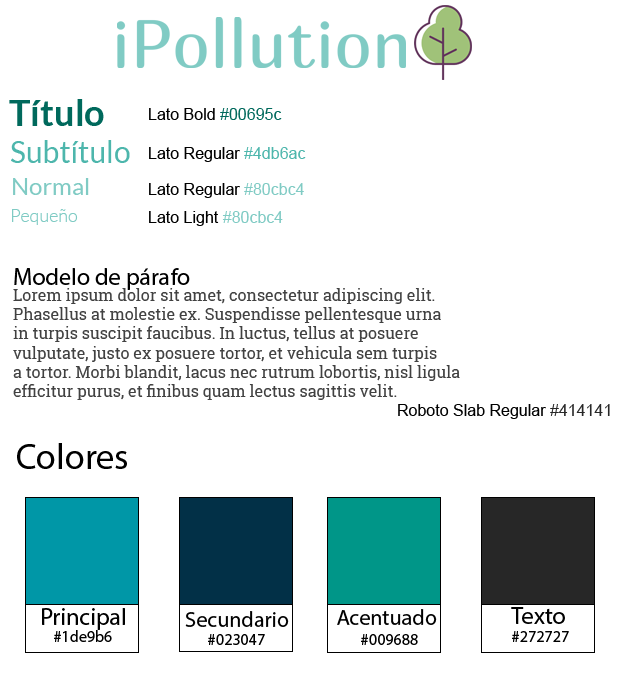
<style>
.page{position:relative;width:626px;height:674px;background:#ffffff}
.page>*{position:absolute;margin:0}
.t1{font:36px "Lato-Bold";color:#00695c}
.t2{font:16px "ArialMT";color:#010101}
.t3{font:16px "ArialMT";color:#00695c}
.t4{font:30px "Lato-Regular";color:#4db6ac}
.t5{font:16px "ArialMT";color:#000000}
.t6{font:16px "ArialMT";color:#4db6ac}
.t7{font:24px "Lato-Regular";color:#80cbc4}
.t8{font:16px "ArialMT";color:#80cbc4}
.t9{font:18px "Lato-Light";color:#80cbc4}
.t10{font:24px "MyriadPro-Regular";color:#000000}
.t11{font:16px "RobotoSlab-Regular";color:#414141}
.t12{font:16px "ArialMT";color:#272727}
.t13{font:36px "MyriadPro-Regular";color:#000000}
.t14{font:22px "MyriadPro-Regular";color:#000000}
.t15{font:16px "MyriadPro-Regular";color:#000000}
</style>
<div class="page">
<p class="t1" style="left:9px;top:99px;width:95px;height:27px">Título</p>
<p class="t2" style="left:149px;top:108px;width:133px;height:12px">Lato Bold <span class="t3">#00695c</span></p>
<p class="t4" style="left:11px;top:140px;width:119px;height:23px">Subtítulo</p>
<p class="t5" style="left:149px;top:147px;width:157px;height:15px">Lato Regular <span class="t6">#4db6ac</span></p>
<p class="t7" style="left:13px;top:178px;width:76px;height:17px">Normal</p>
<p class="t5" style="left:149px;top:183px;width:155px;height:15px">Lato Regular <span class="t8">#80cbc4</span></p>
<p class="t9" style="left:12px;top:209px;width:66px;height:16px">Pequeño</p>
<p class="t5" style="left:149px;top:211px;width:134px;height:15px">Lato Light <span class="t8">#80cbc4</span></p>
<p class="t10" style="left:14px;top:268px;width:176px;height:22px">Modelo de párafo</p>
<p class="t11" style="left:13px;top:288px;width:447px;height:112px">Lorem ipsum dolor sit amet, consectetur adipiscing elit. <br>Phasellus at molestie ex. Suspendisse pellentesque urna <br>in turpis suscipit faucibus. In luctus, tellus at posuere<br>vulputate, justo ex posuere tortor, et vehicula sem turpis<br>a tortor. Morbi blandit, lacus nec rutrum lobortis, nisl ligula<br>efficitur purus, et finibus quam lectus sagittis velit.</p>
<p class="t2" style="left:398px;top:404px;width:212px;height:15px">Roboto Slab Regular <span class="t12">#414141</span></p>
<p class="t13" style="left:17px;top:443px;width:110px;height:26px">Colores</p>
<p class="t10" style="left:42px;top:608px;width:83px;height:22px">Principal</p>
<p class="t14" style="left:185px;top:611px;width:104px;height:16px">Secundario</p>
<p class="t14" style="left:337px;top:609px;width:100px;height:16px">Acentuado</p>
<p class="t10" style="left:511px;top:607px;width:54px;height:17px">Texto</p>
<p class="t15" style="left:54px;top:630px;width:58px;height:12px">#1de9b6</p>
<p class="t15" style="left:208px;top:634px;width:57px;height:11px">#023047</p>
<p class="t15" style="left:361px;top:634px;width:57px;height:11px">#009688</p>
<p class="t15" style="left:512px;top:631px;width:57px;height:11px">#272727</p>
</div>
